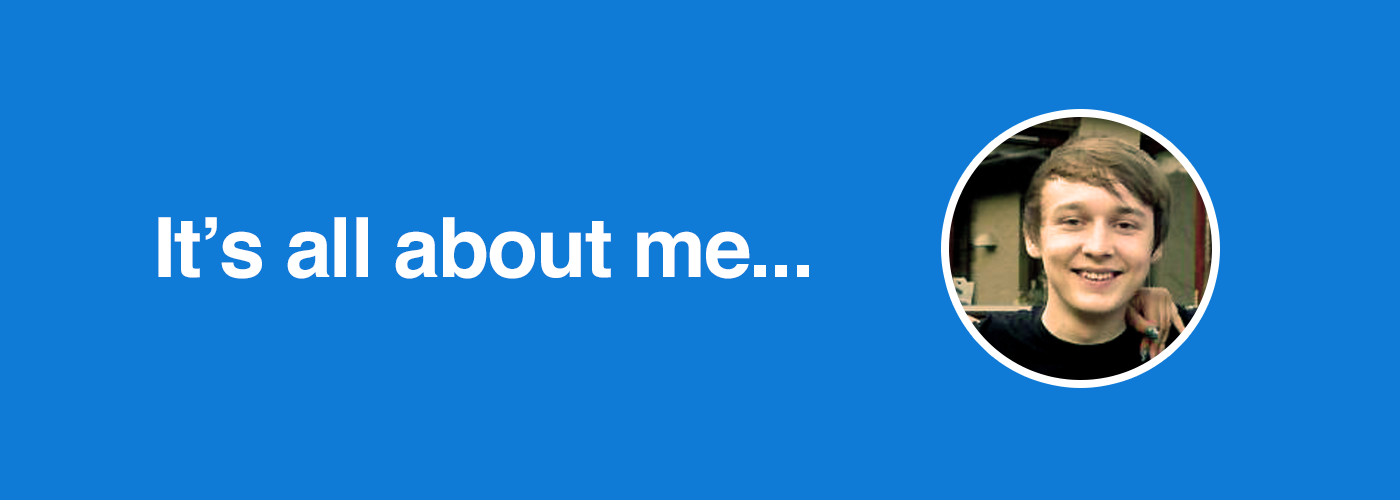
<style>
.page{position:relative;width:1400px;height:500px;background:#107bd7}
.page>*{position:absolute;margin:0}
.t1{font:83px "Helvetica-Bold";letter-spacing:-0.02em;color:#ffffff}
</style>
<div class="page">
<p class="t1" style="left:158px;top:217px;width:651px;height:62px">It’s all about me...</p>
</div>
